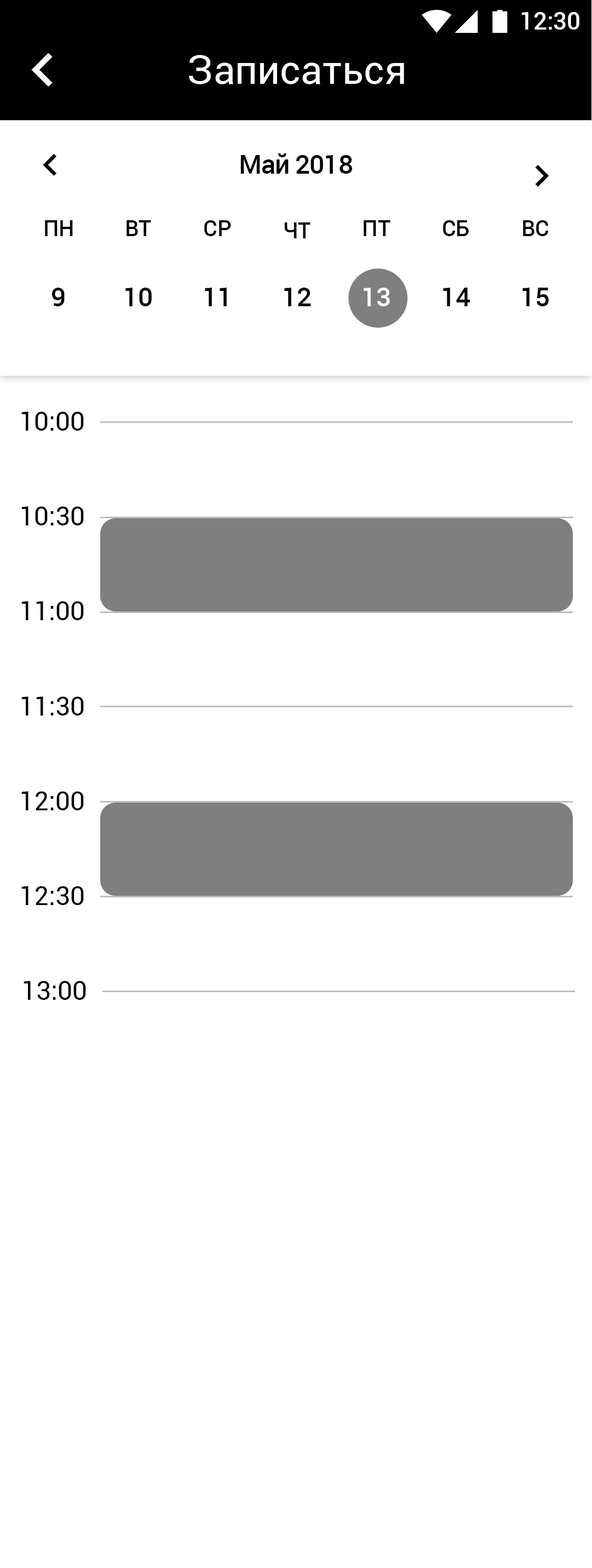
<style>
.page{position:relative;width:592px;height:1568px;background:#ffffff}
.page>*{position:absolute;margin:0}
.t1{font:24.1px "Roboto-Medium";color:#ffffff}
.t2{font:39.4px "Roboto-Regular";color:#ffffff}
.t3{font:26.3px "Roboto-Medium";letter-spacing:-0.023em;color:#000000}
.t4{font:21.8px "Roboto-Medium";color:#000000}
.t5{font:26.3px "Roboto-Medium";color:#000000}
.t6{font:26.3px "Roboto-Medium";color:#ffffff}
.t7{font:26.3px "Roboto-Regular";color:#000000}
</style>
<div class="page">
<p class="t1" style="left:522px;top:12px;width:58px;height:18px">12:30</p>
<p class="t2" style="left:189px;top:55px;width:215px;height:29px">Записаться</p>
<p class="t3" style="left:241px;top:153px;width:111px;height:21px">Май 2018</p>
<p class="t4" style="left:45px;top:220px;width:28px;height:16px">ПН</p>
<p class="t4" style="left:127px;top:220px;width:24px;height:16px">ВТ</p>
<p class="t4" style="left:204px;top:220px;width:27px;height:16px">СР</p>
<p class="t4" style="left:364px;top:220px;width:27px;height:16px">ПТ</p>
<p class="t4" style="left:443px;top:220px;width:26px;height:16px">СБ</p>
<p class="t4" style="left:523px;top:220px;width:25px;height:16px">ВС</p>
<p class="t4" style="left:284px;top:222px;width:27px;height:16px">ЧТ</p>
<p class="t5" style="left:51px;top:288px;width:14px;height:18px">9</p>
<p class="t5" style="left:125px;top:288px;width:27px;height:18px">10</p>
<p class="t5" style="left:205px;top:288px;width:22px;height:18px">11</p>
<p class="t5" style="left:284px;top:288px;width:27px;height:18px">12</p>
<p class="t6" style="left:364px;top:288px;width:26px;height:18px">13</p>
<p class="t5" style="left:443px;top:288px;width:28px;height:18px">14</p>
<p class="t5" style="left:523px;top:288px;width:26px;height:18px">15</p>
<p class="t7" style="left:21px;top:411px;width:63px;height:20px">10:00</p>
<p class="t7" style="left:21px;top:506px;width:63px;height:19px">10:30</p>
<p class="t7" style="left:21px;top:601px;width:63px;height:19px">11:00</p>
<p class="t7" style="left:21px;top:696px;width:63px;height:20px">11:30</p>
<p class="t7" style="left:21px;top:791px;width:63px;height:19px">12:00</p>
<p class="t7" style="left:21px;top:886px;width:63px;height:19px">12:30</p>
<p class="t7" style="left:24px;top:981px;width:62px;height:19px">13:00</p>
</div>
